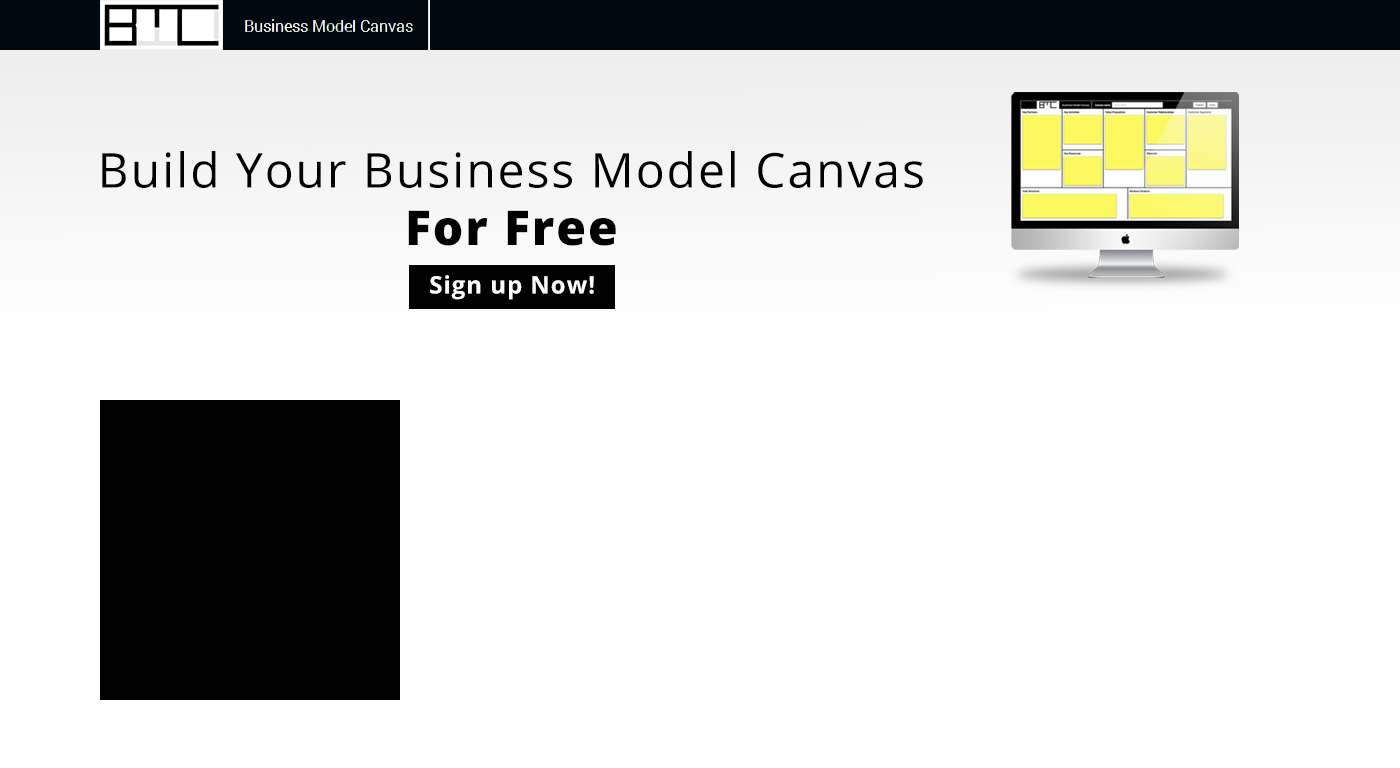
<style>
.page{position:relative;width:1400px;height:768px;background:#ffffff}
.page>*{position:absolute;margin:0}
.t1{font:48px "OpenSans";letter-spacing:0.04em;color:#000000}
.t2{font:48px "OpenSans-Extrabold";letter-spacing:0.04em;color:#000000}
.t3{font:24px "OpenSans-Bold";letter-spacing:0.04em;color:#fcfcfc}
</style>
<div class="page">
<p class="t1" style="left:102px;top:151px;width:821px;height:95px;text-align:center">Build Your Business Model Canvas<br><span class="t2">For Free</span></p>
<p class="t3" style="left:430px;top:275px;width:164px;height:25px">Sign up Now!</p>
</div>
